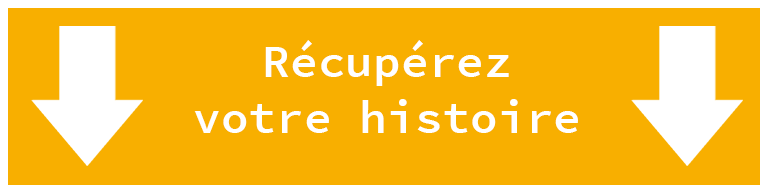
<style>
.page{position:relative;width:768px;height:193px;background:#f8af00}
.page>*{position:absolute;margin:0}
.t1{font:46.3px "SourceCodePro-Semibold";color:#ffffff}
</style>
<div class="page">
<p class="t1" style="left:194px;top:40px;width:384px;height:93px;text-align:center">Récupérez<br>votre histoire</p>
</div>
